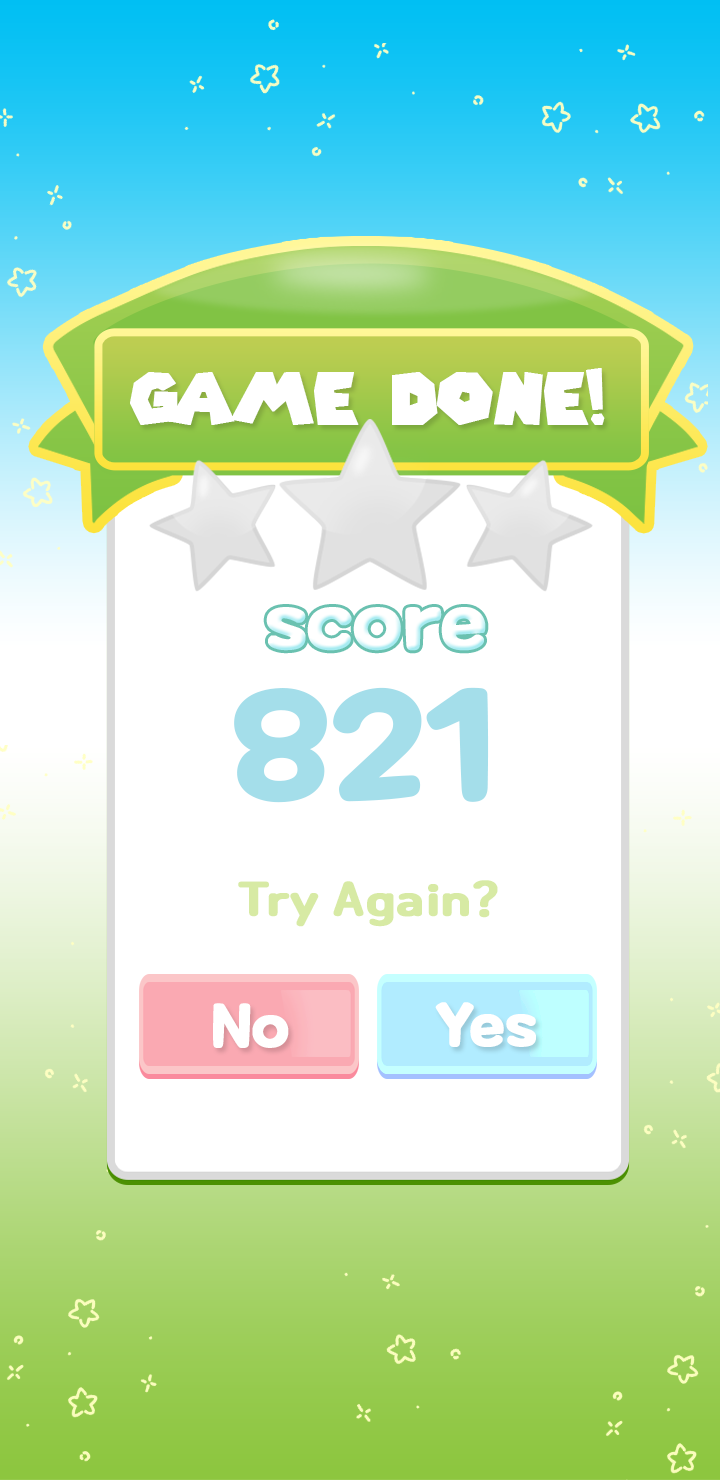
<style>
.page{position:relative;width:720px;height:1480px;background:#ffffff}
.page>*{position:absolute;margin:0}
.t1{font:70px "SuperMarioGalaxy";color:#ffffff;font-weight:bold}
.t2{font:76.4px "MaplestoryBold";color:#ffffff;font-weight:bold}
.t3{font:149.3px "MaplestoryBold";color:#a4deea;font-weight:bold}
.t4{font:45px "Cafe24Ssurround";color:#d7eaa4;font-weight:bold}
.t5{font:58.5px "MaplestoryBold";color:#ffffff;font-weight:bold}
</style>
<div class="page">
<p class="t1" style="left:130px;top:368px;width:475px;height:57px">Game Done!</p>
<p class="t2" style="left:266px;top:607px;width:220px;height:44px">score</p>
<p class="t3" style="left:234px;top:687px;width:255px;height:116px">821</p>
<p class="t4" style="left:238px;top:880px;width:260px;height:47px">Try Again?</p>
<p class="t5" style="left:213px;top:1003px;width:76px;height:45px">No</p>
<p class="t5" style="left:435px;top:1002px;width:101px;height:45px">Yes</p>
</div>
